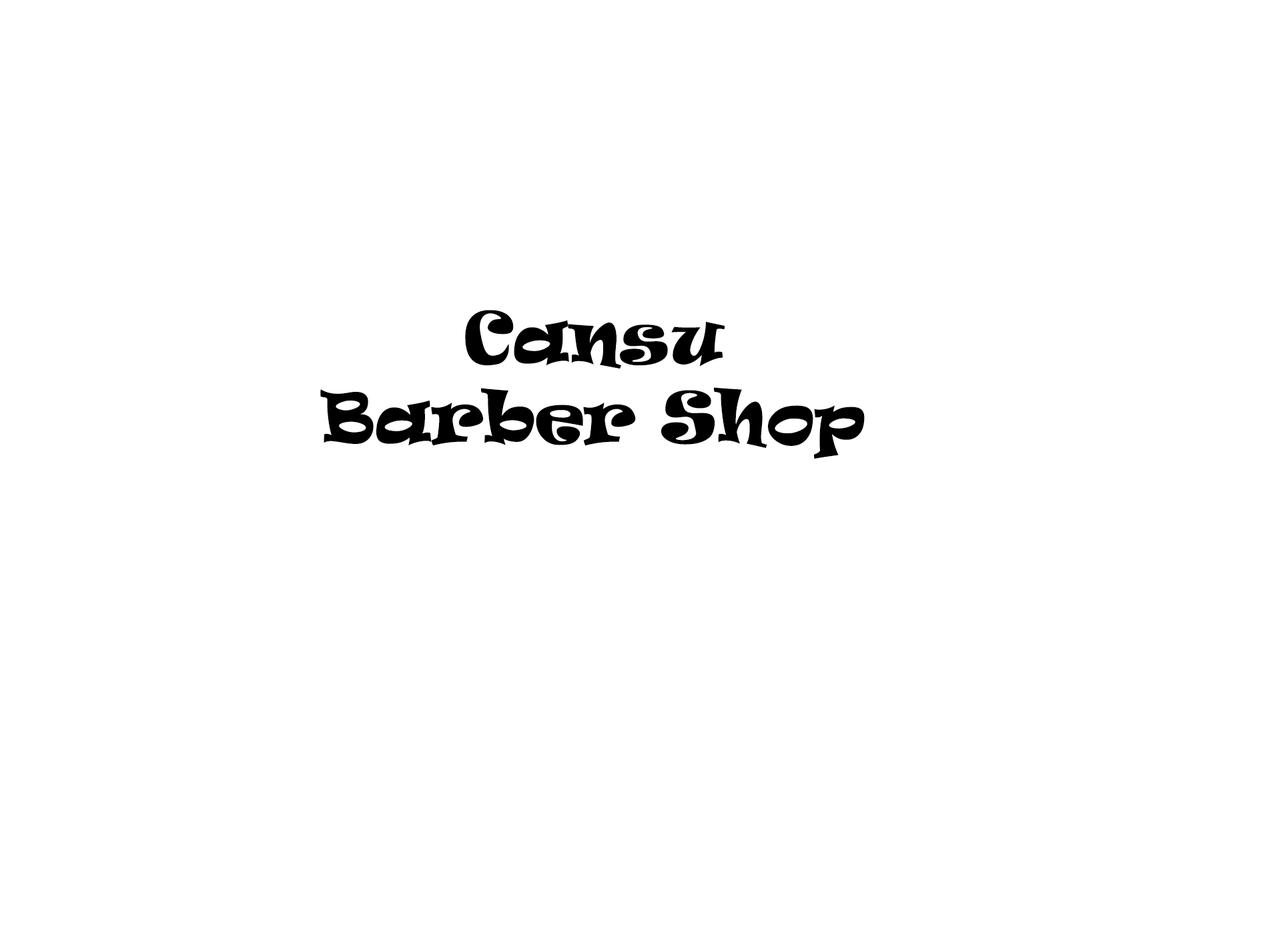
<style>
.page{position:relative;width:1261px;height:946px;background:#ffffff}
.page>*{position:absolute;margin:0}
.t1{font:66.7px "Ravie";color:#000000}
</style>
<div class="page">
<p class="t1" style="left:320px;top:310px;width:545px;height:149px;text-align:center">Cansu<br>Barber Shop</p>
</div>
